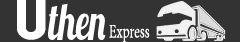
<style>
.page{position:relative;width:240px;height:42px;background:#333333}
.page>*{position:absolute;margin:0}
.t1{font:51.3px "Lobster1.3";color:#ffffff;scale:0.68 1}
.t2{font:20.7px "AdobeDevanagari-Regular";color:#ffffff;scale:0.68 1}
</style>
<div class="page">
<p class="t1" style="left:48px;top:3px;width:58px;height:37px">then</p>
<p class="t2" style="left:109px;top:25px;width:41px;height:18px">Express</p>
</div>
